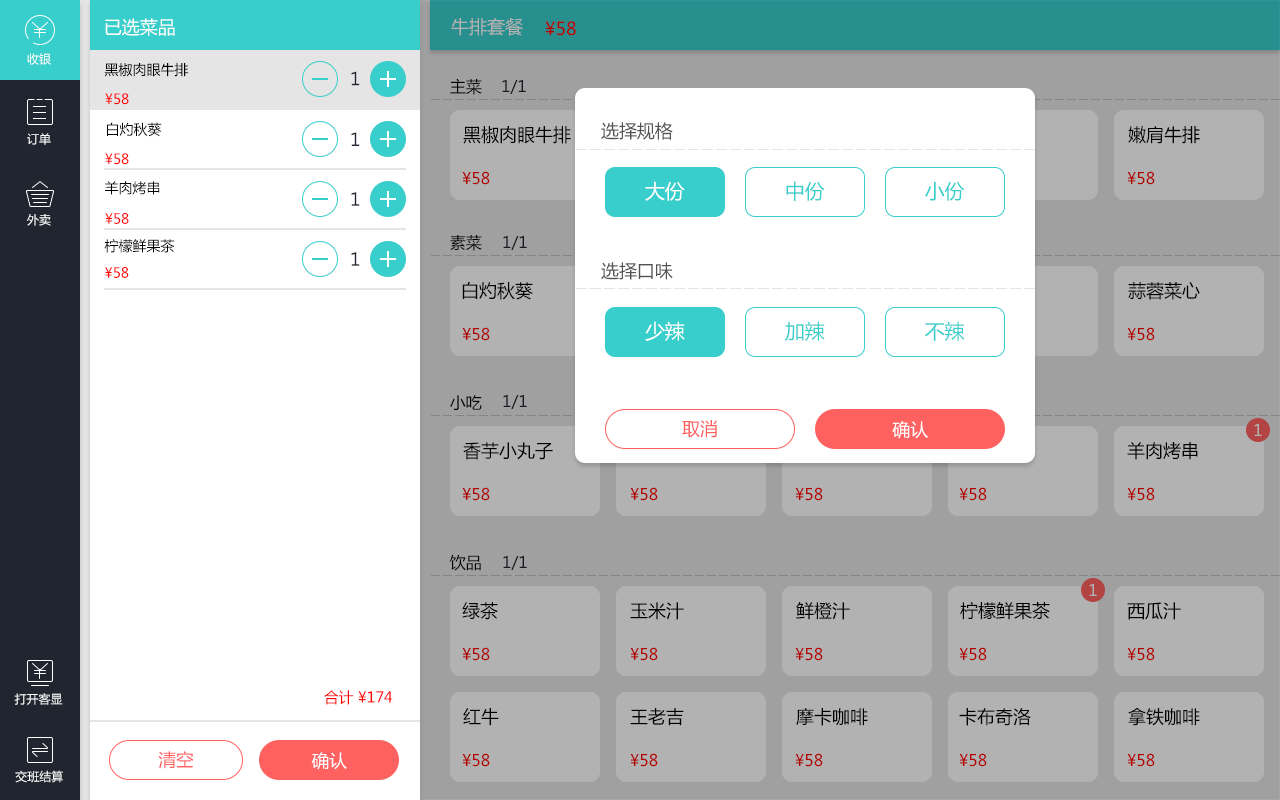
<style>
.page{position:relative;width:1280px;height:800px;background:#ffffff}
.page>*{position:absolute;margin:0}
.t1{font:18px "MicrosoftYaHei";color:#ffffff}
.t2{font:18px "MicrosoftYaHei";color:#b2b2b2}
.t3{font:18px "MicrosoftYaHei";color:#b20000}
.t4{font:12px "MicrosoftYaHei";color:#ffffff}
.t5{font:14px "MicrosoftYaHei";color:#000000}
.t6{font:17.8px "MicrosoftYaHei";color:#212530}
.t7{font:16px "MicrosoftYaHei";color:#000000}
.t8{font:16px "MicrosoftYaHei";color:#212530}
.t9{font:14px "MicrosoftYaHei";color:#ff0000}
.t10{font:18px "MicrosoftYaHei";color:#000000}
.t11{font:18px "MicrosoftYaHei";color:#535353}
.t12{font:16px "MicrosoftYaHei";color:#b20000}
.t13{font:20px "MicrosoftYaHei";color:#ffffff}
.t14{font:20px "MicrosoftYaHei";color:#38cecc}
.t15{font:18px "MicrosoftYaHei";color:#ff6160}
.t16{font:16px "MicrosoftYaHei";color:#b2b2b2}
.t17{font:14.8px "MicrosoftYaHei";color:#ff0000}
.t18{font:17.8px "MicrosoftYaHei";color:#ff6160}
.t19{font:17.8px "MicrosoftYaHei";color:#ffffff}
</style>
<div class="page">
<p class="t1" style="left:105px;top:18px;width:70px;height:18px">已选菜品</p>
<p class="t2" style="left:451px;top:18px;width:72px;height:18px">牛排套餐</p>
<p class="t3" style="left:545px;top:21px;width:31px;height:15px">¥58</p>
<p class="t4" style="left:27px;top:53px;width:24px;height:12px">收银</p>
<p class="t5" style="left:104px;top:62px;width:85px;height:15px">黑椒肉眼牛排</p>
<p class="t6" style="left:351px;top:71px;width:9px;height:15px">1</p>
<p class="t7" style="left:450px;top:78px;width:32px;height:17px">主菜</p>
<p class="t8" style="left:502px;top:79px;width:24px;height:15px">1/1</p>
<p class="t9" style="left:105px;top:93px;width:24px;height:12px">¥58</p>
<p class="t5" style="left:107px;top:122px;width:55px;height:15px">白灼秋葵</p>
<p class="t10" style="left:463px;top:126px;width:108px;height:18px">黑椒肉眼牛排</p>
<p class="t11" style="left:601px;top:122px;width:72px;height:18px">选择规格</p>
<p class="t10" style="left:1128px;top:126px;width:72px;height:18px">嫩肩牛排</p>
<p class="t4" style="left:27px;top:133px;width:24px;height:12px">订单</p>
<p class="t6" style="left:351px;top:132px;width:9px;height:14px">1</p>
<p class="t9" style="left:105px;top:153px;width:24px;height:12px">¥58</p>
<p class="t12" style="left:462px;top:171px;width:28px;height:14px">¥58</p>
<p class="t12" style="left:1127px;top:171px;width:28px;height:14px">¥58</p>
<p class="t5" style="left:105px;top:181px;width:55px;height:14px">羊肉烤串</p>
<p class="t13" style="left:645px;top:181px;width:40px;height:20px">大份</p>
<p class="t14" style="left:786px;top:181px;width:39px;height:20px">中份</p>
<p class="t14" style="left:925px;top:181px;width:40px;height:20px">小份</p>
<p class="t6" style="left:351px;top:192px;width:9px;height:14px">1</p>
<p class="t4" style="left:27px;top:214px;width:24px;height:12px">外卖</p>
<p class="t9" style="left:105px;top:213px;width:24px;height:11px">¥58</p>
<p class="t5" style="left:104px;top:239px;width:71px;height:14px">柠檬鲜果茶</p>
<p class="t7" style="left:450px;top:235px;width:32px;height:16px">素菜</p>
<p class="t8" style="left:503px;top:235px;width:24px;height:15px">1/1</p>
<p class="t6" style="left:351px;top:252px;width:9px;height:14px">1</p>
<p class="t9" style="left:105px;top:267px;width:24px;height:11px">¥58</p>
<p class="t11" style="left:601px;top:262px;width:72px;height:18px">选择口味</p>
<p class="t10" style="left:462px;top:281px;width:71px;height:19px">白灼秋葵</p>
<p class="t10" style="left:1128px;top:282px;width:72px;height:18px">蒜蓉菜心</p>
<p class="t12" style="left:462px;top:327px;width:28px;height:14px">¥58</p>
<p class="t13" style="left:645px;top:321px;width:40px;height:20px">少辣</p>
<p class="t14" style="left:784px;top:321px;width:41px;height:20px">加辣</p>
<p class="t14" style="left:925px;top:321px;width:40px;height:20px">不辣</p>
<p class="t12" style="left:1127px;top:327px;width:28px;height:14px">¥58</p>
<p class="t7" style="left:450px;top:395px;width:32px;height:15px">小吃</p>
<p class="t8" style="left:503px;top:394px;width:24px;height:15px">1/1</p>
<p class="t15" style="left:682px;top:420px;width:35px;height:18px">取消</p>
<p class="t1" style="left:892px;top:421px;width:36px;height:18px">确认</p>
<p class="t16" style="left:1254px;top:423px;width:8px;height:13px">1</p>
<p class="t10" style="left:463px;top:442px;width:90px;height:18px">香芋小丸子</p>
<p class="t10" style="left:1127px;top:442px;width:71px;height:18px">羊肉烤串</p>
<p class="t12" style="left:462px;top:487px;width:28px;height:14px">¥58</p>
<p class="t12" style="left:630px;top:487px;width:28px;height:14px">¥58</p>
<p class="t12" style="left:795px;top:487px;width:28px;height:14px">¥58</p>
<p class="t12" style="left:959px;top:487px;width:28px;height:14px">¥58</p>
<p class="t12" style="left:1127px;top:487px;width:28px;height:14px">¥58</p>
<p class="t7" style="left:449px;top:554px;width:32px;height:17px">饮品</p>
<p class="t8" style="left:503px;top:555px;width:24px;height:15px">1/1</p>
<p class="t16" style="left:1089px;top:583px;width:8px;height:13px">1</p>
<p class="t10" style="left:462px;top:602px;width:36px;height:18px">绿茶</p>
<p class="t10" style="left:630px;top:602px;width:54px;height:18px">玉米汁</p>
<p class="t10" style="left:796px;top:602px;width:54px;height:18px">鲜橙汁</p>
<p class="t10" style="left:960px;top:602px;width:90px;height:18px">柠檬鲜果茶</p>
<p class="t10" style="left:1127px;top:602px;width:54px;height:18px">西瓜汁</p>
<p class="t12" style="left:462px;top:647px;width:28px;height:14px">¥58</p>
<p class="t12" style="left:630px;top:647px;width:28px;height:14px">¥58</p>
<p class="t12" style="left:795px;top:647px;width:28px;height:14px">¥58</p>
<p class="t12" style="left:959px;top:647px;width:28px;height:14px">¥58</p>
<p class="t12" style="left:1127px;top:647px;width:28px;height:14px">¥58</p>
<p class="t4" style="left:14px;top:693px;width:49px;height:12px">打开客显</p>
<p class="t17" style="left:324px;top:690px;width:69px;height:15px">合计 ¥174</p>
<p class="t10" style="left:463px;top:708px;width:36px;height:18px">红牛</p>
<p class="t10" style="left:630px;top:708px;width:54px;height:18px">王老吉</p>
<p class="t10" style="left:796px;top:708px;width:72px;height:18px">摩卡咖啡</p>
<p class="t10" style="left:959px;top:708px;width:72px;height:18px">卡布奇洛</p>
<p class="t10" style="left:1128px;top:708px;width:72px;height:18px">拿铁咖啡</p>
<p class="t18" style="left:158px;top:751px;width:36px;height:18px">清空</p>
<p class="t19" style="left:311px;top:752px;width:36px;height:18px">确认</p>
<p class="t12" style="left:462px;top:753px;width:28px;height:14px">¥58</p>
<p class="t12" style="left:630px;top:753px;width:28px;height:14px">¥58</p>
<p class="t12" style="left:795px;top:753px;width:28px;height:14px">¥58</p>
<p class="t12" style="left:959px;top:753px;width:28px;height:14px">¥58</p>
<p class="t12" style="left:1127px;top:753px;width:28px;height:14px">¥58</p>
<p class="t4" style="left:15px;top:770px;width:48px;height:13px">交班结算</p>
</div>
